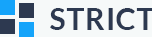
<style>
.page{position:relative;width:152px;height:37px;background:#f6f9f9}
.page>*{position:absolute;margin:0}
.t1{font:30px "Lato-Bold";letter-spacing:0.025em;color:#2d3950}
</style>
<div class="page">
<p class="t1" style="left:50px;top:8px;width:102px;height:22px">STRICT</p>
</div>
